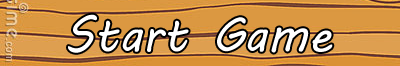
<style>
.page{position:relative;width:400px;height:66px}
.page>*{position:absolute;margin:0}
.t1{font:48px "MVBoli";color:#ffffff}
</style>
<div class="page">
<p class="t1" style="left:68px;top:14px;width:265px;height:39px">Start Game</p>
</div>
